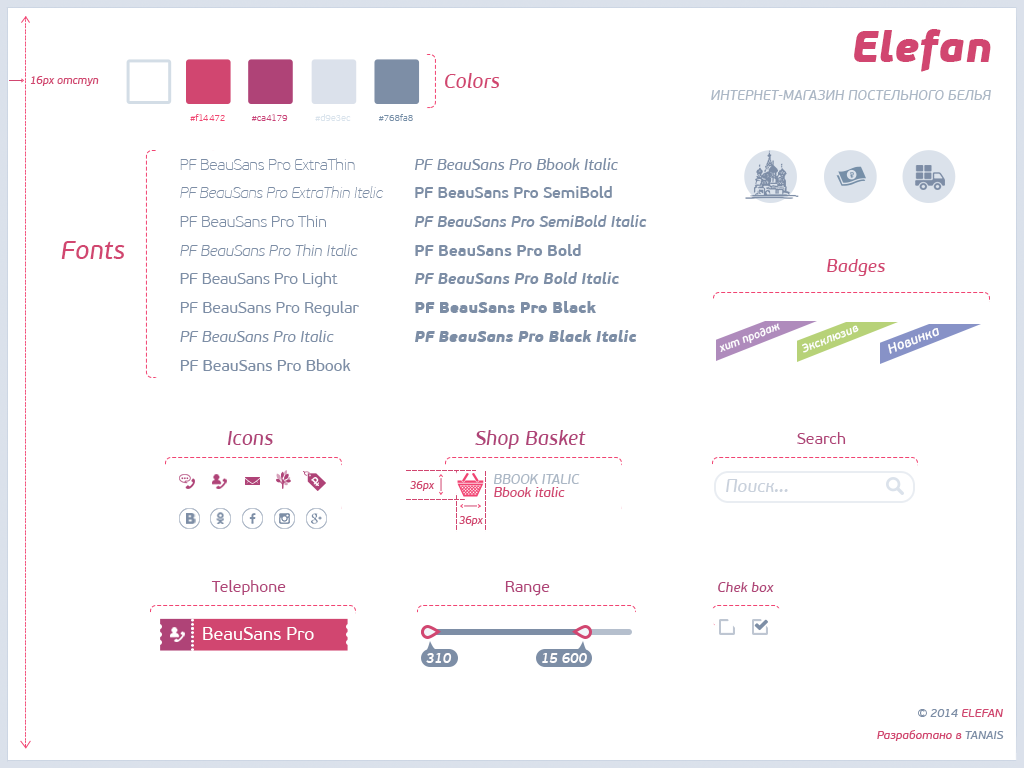
<style>
.page{position:relative;width:1024px;height:768px;background:#ffffff}
.page>*{position:absolute;margin:0}
.t1{font:43.5px "PFBeauSansPro-BlackItalic";color:#d14670}
.t2{font:10.9px "PFBeauSansPro-BbookItalic";color:#d14670}
.t3{font:20.1px "PFBeauSansPro-BbookItalic";color:#d14670}
.t4{font:13.9px "PFBeauSansPro-BbookItalic";color:#abb7c5;text-transform:uppercase}
.t5{font:9.4px "PFBeauSansPro-Thin";color:#f14472}
.t6{font:9.4px "PFBeauSansPro-Thin";color:#ca4179}
.t7{font:9.4px "PFBeauSansPro-Thin";color:#d9e3ec}
.t8{font:9.4px "PFBeauSansPro-Thin";color:#768fa8}
.t9{font:15.5px/28.7px "PFBeauSansPro-XThinItalic";color:#7d8ea6}
.t10{font:15.5px/28.7px "PFBeauSansPro-XThin";color:#7d8ea6}
.t11{font:15.5px/28.7px "PFBeauSansPro-Thin";color:#7d8ea6}
.t12{font:15.5px/28.7px "PFBeauSansPro-ThinItalic";color:#7d8ea6}
.t13{font:15.5px/28.7px "PFBeauSansPro-Light";color:#7d8ea6}
.t14{font:15.5px/28.7px "PFBeauSansPro-Regular";color:#7d8ea6}
.t15{font:15.5px/28.7px "PFBeauSansPro-Italic";color:#7d8ea6}
.t16{font:15.5px/28.7px "PFBeauSansPro-Bbook";color:#7d8ea6}
.t17{font:15.5px/28.7px "PFBeauSansPro-SemiBoldItalic";color:#7d8ea6}
.t18{font:15.5px/28.7px "PFBeauSansPro-BbookItalic";color:#7d8ea6}
.t19{font:15.5px/28.7px "PFBeauSansPro-SemiBold";color:#7d8ea6}
.t20{font:15.5px/28.7px "PFBeauSansPro-Bold";color:#7d8ea6}
.t21{font:15.5px/28.7px "PFBeauSansPro-BoldItalic";color:#7d8ea6}
.t22{font:15.5px/28.7px "PFBeauSansPro-Black";color:#7d8ea6}
.t23{font:15.5px/28.7px "PFBeauSansPro-BlackItalic";color:#7d8ea6}
.t24{font:9.1px "PTRoubleSans";color:#7b93ab}
.t25{font:25.8px "PFBeauSansPro-BbookItalic";color:#d14670}
.t26{font:18.1px "PFBeauSansPro-BbookItalic";color:#d14670}
.t27{font:13.4px "PFBeauSansPro-SemiBoldItalic";color:#ffffff}
.t28{font:20.1px "PFBeauSansPro-BbookItalic";color:#af4377}
.t29{font:15.8px "PFBeauSansPro-Regular";color:#af4377}
.t30{font:14.4px "PTRoubleSans";color:#ffffff}
.t31{font:13.6px "PFBeauSansPro-BbookItalic";color:#abb7c5;text-transform:uppercase}
.t32{font:17.8px "PFBeauSansPro-BbookItalic";color:#c9d1dc}
.t33{font:13.6px "PFBeauSansPro-BbookItalic";color:#d14670}
.t34{font:13.9px "PFBeauSansPro-BbookItalic";color:#af4377}
.t35{font:17.8px "PFBeauSansPro-Regular";color:#ffffff}
.t36{font:13.9px "PFBeauSansPro-SemiBoldItalic";color:#fffefe}
.t37{font:11.9px "PFBeauSansPro-BbookItalic";color:#7d8ea6}
.t38{font:11.9px "PFBeauSansPro-BbookItalic";color:#d14670;text-transform:uppercase}
.t39{font:11.9px "PFBeauSansPro-BbookItalic";color:#d14670}
</style>
<div class="page">
<p class="t1" style="left:854px;top:29px;width:137px;height:43px">Elefan</p>
<p class="t2" style="left:30px;top:76px;width:69px;height:10px">16px отступ</p>
<p class="t3" style="left:445px;top:73px;width:55px;height:15px">Colors</p>
<p class="t4" style="left:711px;top:90px;width:280px;height:10px">Интернет-магазин постельного белья</p>
<p class="t5" style="left:190px;top:114px;width:35px;height:7px">#f14472</p>
<p class="t6" style="left:251px;top:114px;width:37px;height:7px">#ca4179</p>
<p class="t7" style="left:315px;top:114px;width:36px;height:7px">#d9e3ec</p>
<p class="t8" style="left:378px;top:114px;width:35px;height:7px">#768fa8</p>
<p class="t9" style="left:180px;top:158px;width:204px;height:213px"><span class="t10">PF BeauSans Pro ExtraThin<br></span>PF BeauSans Pro ExtraThin Itelic<br><span class="t11">PF BeauSans Pro Thin<br></span><span class="t12">PF BeauSans Pro Thin Italic<br></span><span class="t13">PF BeauSans Pro Light<br></span><span class="t14">PF BeauSans Pro Regular<br></span><span class="t15">PF BeauSans Pro Italic<br></span><span class="t16">PF BeauSans Pro Bbook</span></p>
<p class="t17" style="left:415px;top:158px;width:232px;height:184px"><span class="t18">PF BeauSans Pro Bbook Italic<br></span><span class="t19">PF BeauSans Pro SemiBold<br></span>PF BeauSans Pro SemiBold Italic<br><span class="t20">PF BeauSans Pro Bold<br></span><span class="t21">PF BeauSans Pro Bold Italic<br></span><span class="t22">PF BeauSans Pro Black<br></span><span class="t23">PF BeauSans Pro Black Italic</span></p>
<p class="t24" style="left:850px;top:172px;width:4px;height:6px;rotate:-15deg">5</p>
<p class="t25" style="left:61px;top:241px;width:64px;height:18px">Fonts</p>
<p class="t26" style="left:827px;top:259px;width:58px;height:17px">Badges</p>
<p class="t27" style="left:888px;top:328px;width:51px;height:26px;rotate:-21deg">Новинка</p>
<p class="t28" style="left:227px;top:431px;width:46px;height:14px">Icons</p>
<p class="t28" style="left:475px;top:430px;width:111px;height:19px">Shop Basket</p>
<p class="t29" style="left:797px;top:432px;width:49px;height:12px">Search</p>
<p class="t30" style="left:311px;top:477px;width:8px;height:9px;rotate:-44deg">7</p>
<p class="t2" style="left:410px;top:481px;width:25px;height:10px">36px</p>
<p class="t31" style="left:494px;top:474px;width:86px;height:10px">Bbook italic</p>
<p class="t32" style="left:726px;top:479px;width:62px;height:13px">Поиск...</p>
<p class="t33" style="left:494px;top:487px;width:71px;height:10px">Bbook italic</p>
<p class="t2" style="left:459px;top:516px;width:24px;height:10px">36px</p>
<p class="t29" style="left:211px;top:580px;width:75px;height:15px">Telephone</p>
<p class="t29" style="left:505px;top:581px;width:45px;height:15px">Range</p>
<p class="t34" style="left:718px;top:582px;width:56px;height:10px">Chek box</p>
<p class="t35" style="left:203px;top:627px;width:111px;height:13px">BeauSans Pro</p>
<p class="t36" style="left:426px;top:653px;width:26px;height:10px">310</p>
<p class="t36" style="left:542px;top:653px;width:45px;height:10px">15 600</p>
<p class="t37" style="left:918px;top:709px;width:85px;height:8px">© 2014 <span class="t38">elefan</span></p>
<p class="t39" style="left:877px;top:730px;width:127px;height:11px">Разработано в <span class="t37">TANAIS</span></p>
</div>
